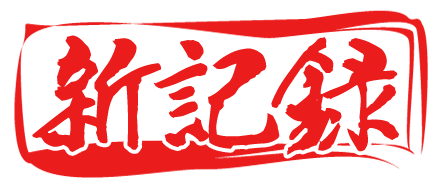
<style>
.page{position:relative;width:445px;height:187px;background:#ffffff}
.page>*{position:absolute;margin:0}
.t1{font:120px "AB_ootori";color:#ea1c1c}
</style>
<div class="page">
<p class="t1" style="left:32px;top:35px;width:367px;height:120px">新記録</p>
</div>
